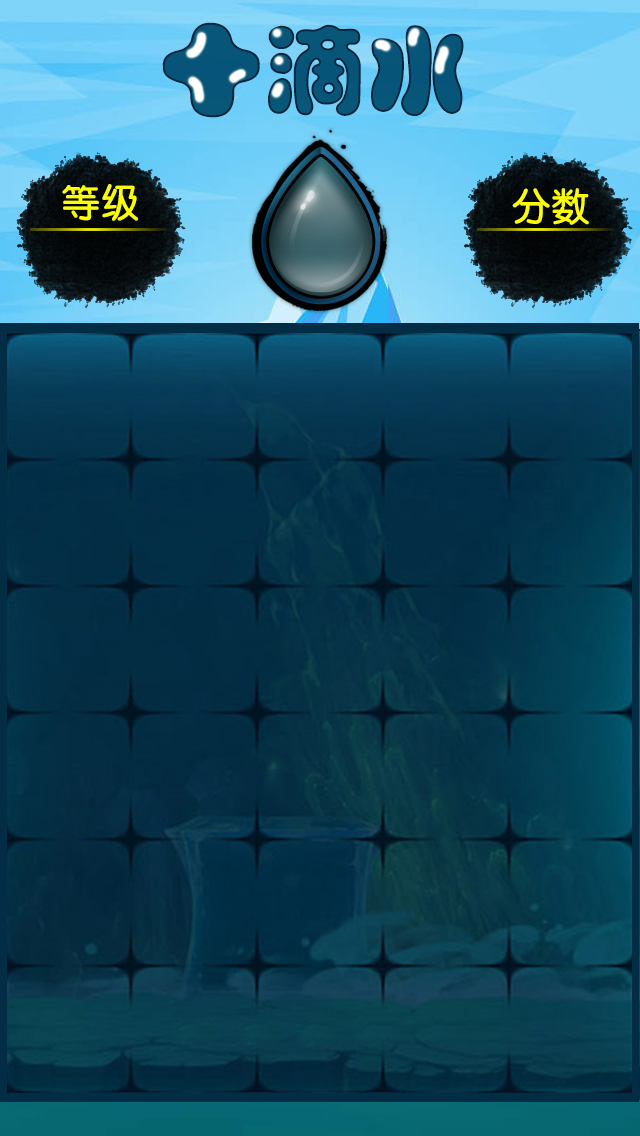
<style>
.page{position:relative;width:640px;height:1136px}
.page>*{position:absolute;margin:0}
.t1{font:100px "FZPTYJW--GB1-0";color:#095c7a;font-weight:bold}
.t2{font:38px "FZY3JW--GB1-0";color:#fcff02;font-weight:bold}
</style>
<div class="page">
<p class="t1" style="left:162px;top:22px;width:302px;height:96px">十滴水</p>
<p class="t2" style="left:62px;top:184px;width:76px;height:37px">等级</p>
<p class="t2" style="left:512px;top:188px;width:77px;height:37px">分数</p>
</div>
